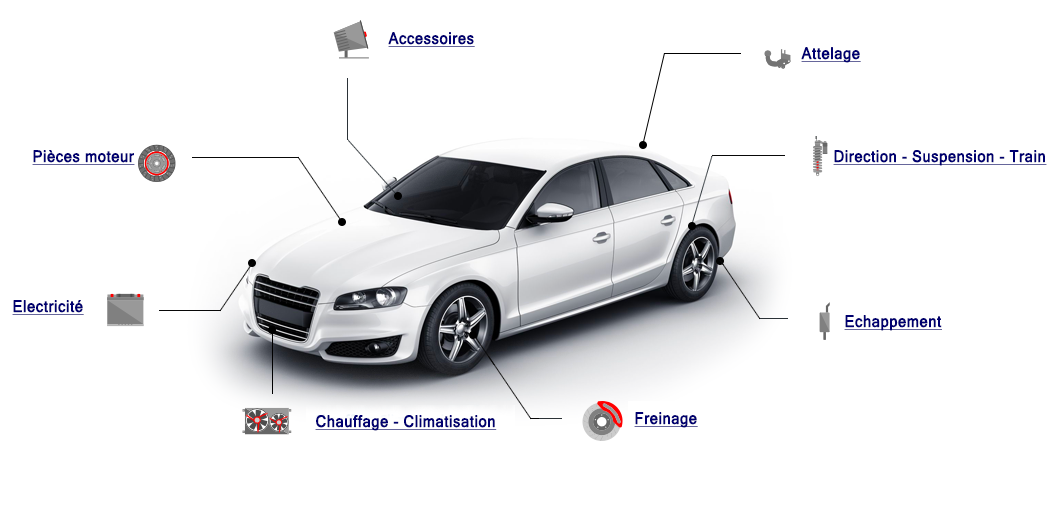
<style>
.page{position:relative;width:1053px;height:523px;background:#ffffff}
.page>*{position:absolute;margin:0}
.t1{font:16px "MicrosoftSansSerif";letter-spacing:0.025em;color:#000070;font-weight:bold;text-decoration:underline;scale:0.9 1}
</style>
<div class="page">
<p class="t1" style="left:388px;top:32px;width:87px;height:15px">Accessoires</p>
<p class="t1" style="left:801px;top:47px;width:60px;height:16px">Attelage</p>
<p class="t1" style="left:32px;top:150px;width:103px;height:15px">Pièces moteur</p>
<p class="t1" style="left:833px;top:150px;width:214px;height:16px">Direction - Suspension - Train</p>
<p class="t1" style="left:12px;top:300px;width:72px;height:15px">Electricité</p>
<p class="t1" style="left:844px;top:315px;width:98px;height:16px">Echappement</p>
<p class="t1" style="left:634px;top:412px;width:64px;height:16px">Freinage</p>
<p class="t1" style="left:315px;top:415px;width:182px;height:16px">Chauffage - Climatisation</p>
</div>
